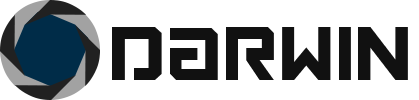
<style>
.page{position:relative;width:419px;height:100px;background:#ffffff}
.page>*{position:absolute;margin:0}
.t1{font:80.3px "Loaded";color:#000000}
</style>
<div class="page">
<p class="t1" style="left:112px;top:27px;width:296px;height:53px">Darwin</p>
</div>
